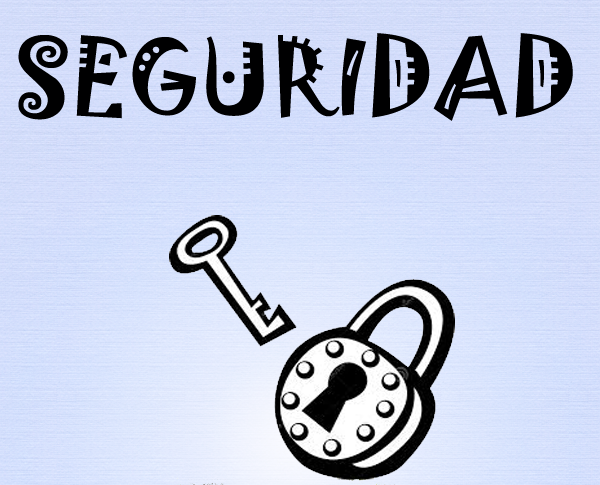
<style>
.page{position:relative;width:600px;height:485px}
.page>*{position:absolute;margin:0}
.t1{font:95px "Jokerman-Regular";color:#000001}
</style>
<div class="page">
<p class="t1" style="left:18px;top:33px;width:555px;height:88px">SEGURIDAD</p>
</div>
